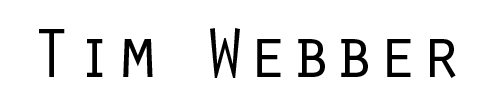
<style>
.page{position:relative;width:500px;height:100px;background:#ffffff}
.page>*{position:absolute;margin:0}
.t1{font:72px "OratorStd";color:#000000}
</style>
<div class="page">
<p class="t1" style="left:39px;top:28px;width:417px;height:50px">Tim Webber</p>
</div>
